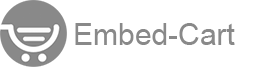
<style>
.page{position:relative;width:255px;height:67px;background:#ffffff}
.page>*{position:absolute;margin:0}
.t1{font:30px "ArialMT";color:#898989}
</style>
<div class="page">
<p class="t1" style="left:75px;top:23px;width:160px;height:22px">Embed-Cart</p>
</div>
